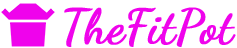
<style>
.page{position:relative;width:237px;height:48px;background:#ffffff}
.page>*{position:absolute;margin:0}
.t1{font:48px "DancingScript-Regular";color:#ef03ec;font-weight:bold}
</style>
<div class="page">
<p class="t1" style="left:64px;top:7px;width:172px;height:40px">TheFitPot</p>
</div>
